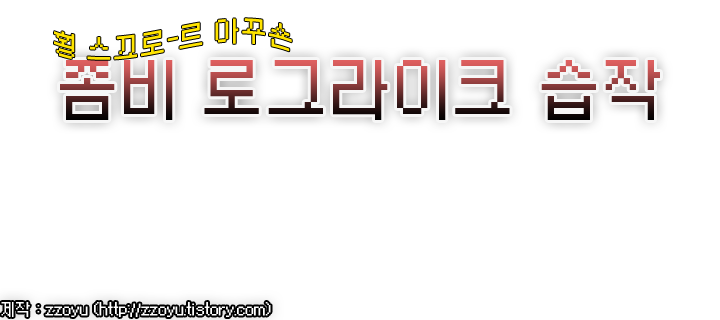
<style>
.page{position:relative;width:720px;height:320px;background:#ffffff}
.page>*{position:absolute;margin:0}
.t1{font:30px "morris9";letter-spacing:-0.025em;color:#ffe400}
.t2{font:72px "morris9";letter-spacing:-0.025em}
.t3{font:18px "morris9";letter-spacing:-0.025em;color:#ffffff}
</style>
<div class="page">
<p class="t1" style="left:54px;top:18px;width:238px;height:42px">횡 스끄로-르 아꾸숀</p>
<p class="t2" style="left:60px;top:60px;width:600px;height:60px">좀비 로그라이크 습작</p>
<p class="t3" style="left:1px;top:302px;width:270px;height:15px">제작 : zzoyu (http://zzoyu.tistory.com)</p>
</div>
